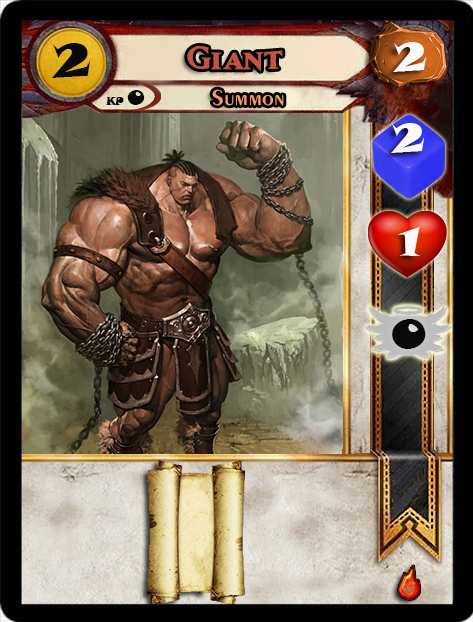
<style>
.page{position:relative;width:473px;height:622px}
.page>*{position:absolute;margin:0}
.t1{font:46.6px "SnapITC-Regular";color:#090909;scale:1.05 1}
.t2{font:40px "MatrixBoldSmallCaps";color:#c25443;scale:1.06 1}
.t3{font:40px "SnapITC-Regular";color:#fef9f9;scale:1.05 1}
.t4{font:22.7px "Exotic350BT-DemiBold";color:#f89c64;scale:1.06 1}
.t5{font:20.5px "SnapITC-Regular";color:#090909}
.t6{font:40px "SnapITC-Regular";color:#090909;scale:1.05 1}
</style>
<div class="page">
<p class="t1" style="left:51px;top:43px;width:40px;height:35px">2</p>
<p class="t2" style="left:187px;top:46px;width:96px;height:25px">Giant</p>
<p class="t3" style="left:393px;top:42px;width:34px;height:30px">2</p>
<p class="t4" style="left:212px;top:89px;width:72px;height:17px">Summon</p>
<p class="t5" style="left:127px;top:90px;width:18px;height:15px">0</p>
<p class="t3" style="left:391px;top:123px;width:34px;height:30px">2</p>
<p class="t3" style="left:398px;top:227px;width:22px;height:29px">1</p>
<p class="t6" style="left:392px;top:319px;width:34px;height:30px">0</p>
</div>
